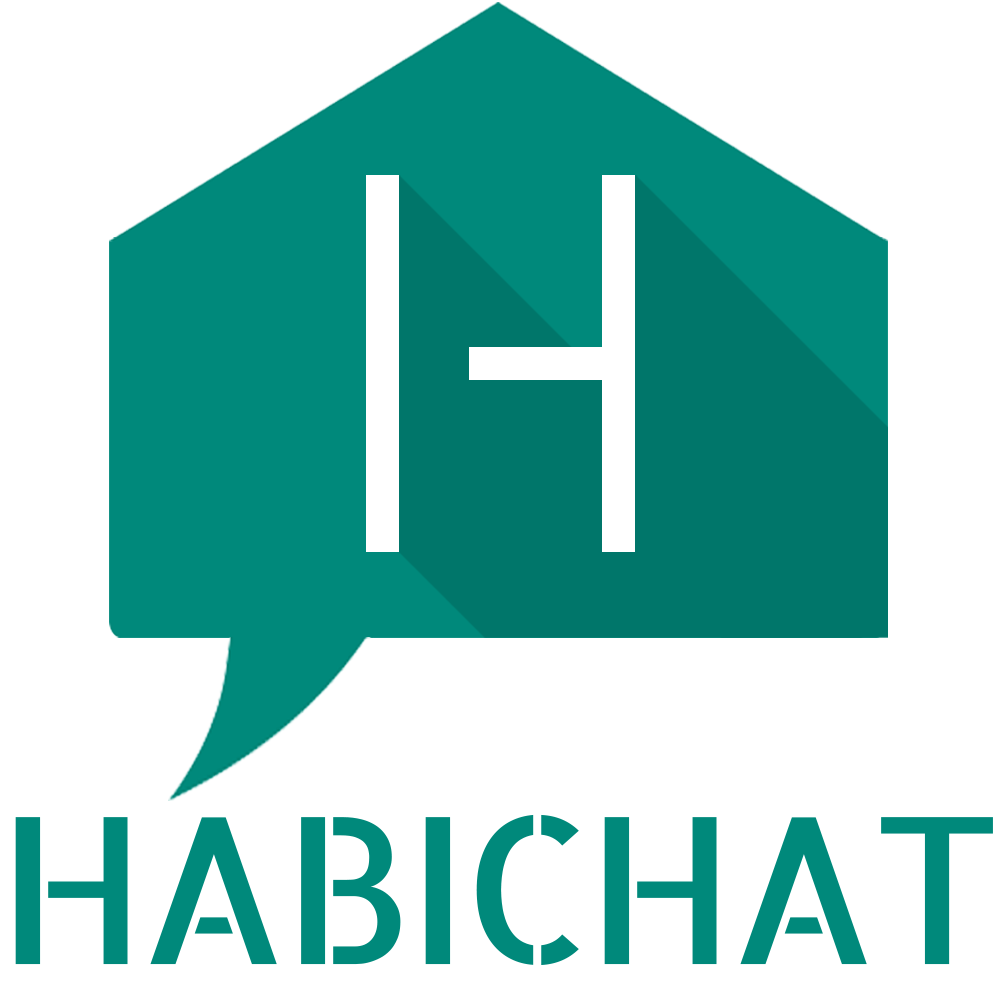
<style>
.page{position:relative;width:998px;height:998px;background:#ffffff}
.page>*{position:absolute;margin:0}
.t1{font:204.3px "AllertaStencil-Regular";letter-spacing:-0.04em;color:#00897b}
</style>
<div class="page">
<p class="t1" style="left:15px;top:814px;width:978px;height:151px">HABICHAT</p>
</div>
